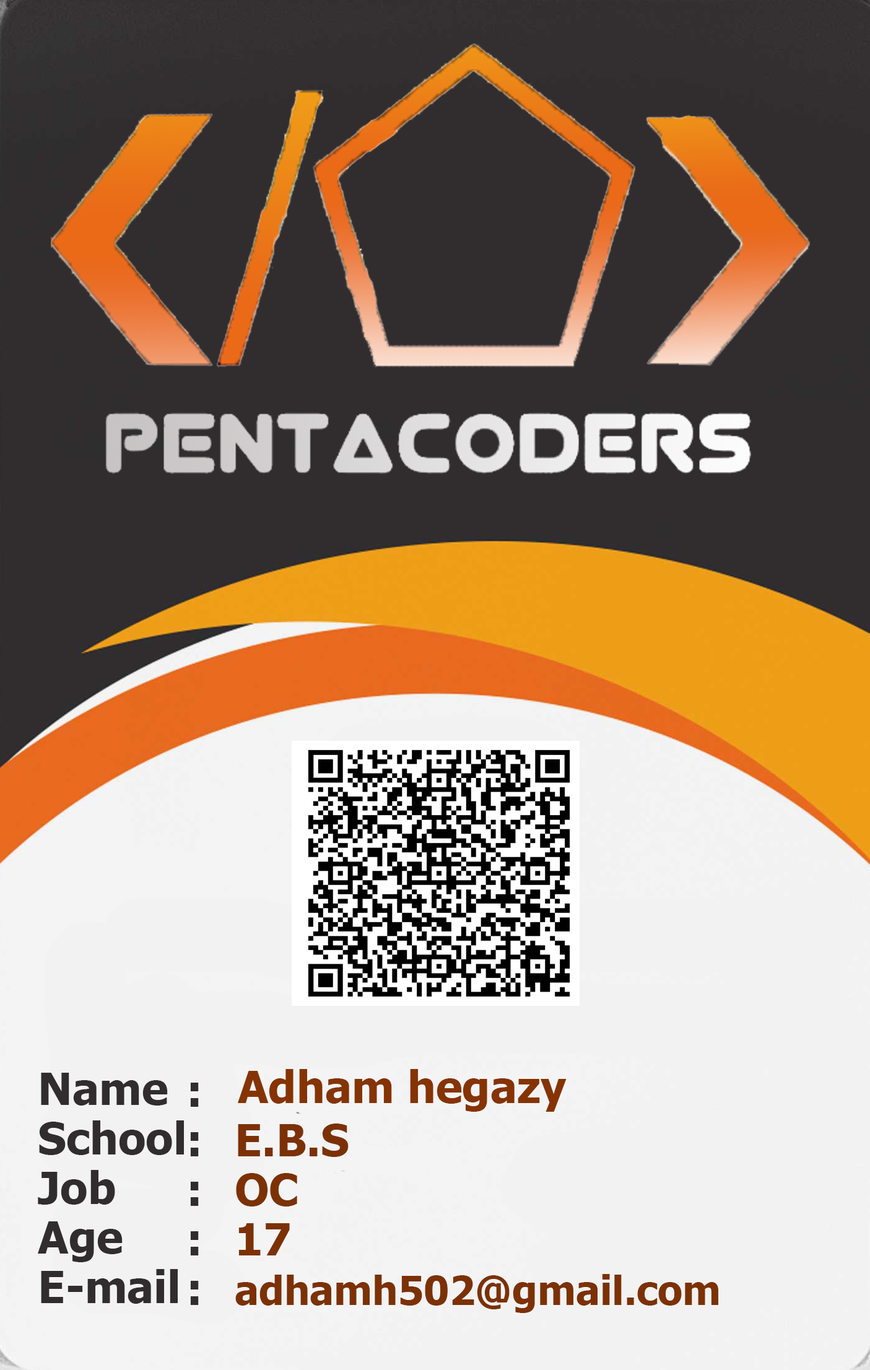
<style>
.page{position:relative;width:870px;height:1370px;background:#312d2e}
.page>*{position:absolute;margin:0}
.t1{font:44.6px/49.6px "Tahoma-Bold";color:#312d2e}
.t2{font:44.6px "Tahoma-Bold";color:#863302}
.t3{font:40.3px/49.6px "Tahoma-Bold";color:#7c3104}
.t4{font:44.6px/49.6px "Tahoma-Bold";color:#7c3104}
</style>
<div class="page">
<p class="t1" style="left:38px;top:1073px;width:146px;height:231px">Name<br>School <br>Job      <br>Age <br>E-mail</p>
<p class="t2" style="left:238px;top:1069px;width:329px;height:43px">Adham hegazy</p>
<p class="t1" style="left:190px;top:1083px;width:9px;height:222px">:<br>:<br>:<br>:<br>:</p>
<p class="t3" style="left:235px;top:1124px;width:484px;height:189px"><span class="t4">E.B.S<br>OC<br>17<br></span>adhamh502@gmail.com</p>
</div>
